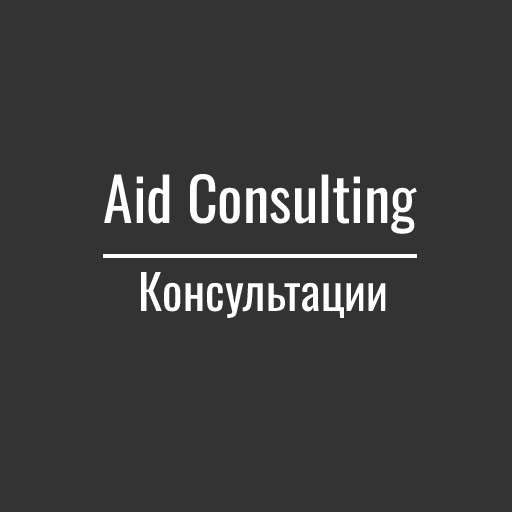
<style>
.page{position:relative;width:512px;height:512px;background:#333333}
.page>*{position:absolute;margin:0}
.t1{font:60px "Oswald-Regular";color:#ffffff}
.t2{font:48px "Oswald-Regular";color:#ffffff}
</style>
<div class="page">
<p class="t1" style="left:104px;top:174px;width:313px;height:60px">Aid Consulting</p>
<p class="t2" style="left:141px;top:272px;width:245px;height:46px">Консультации</p>
</div>
